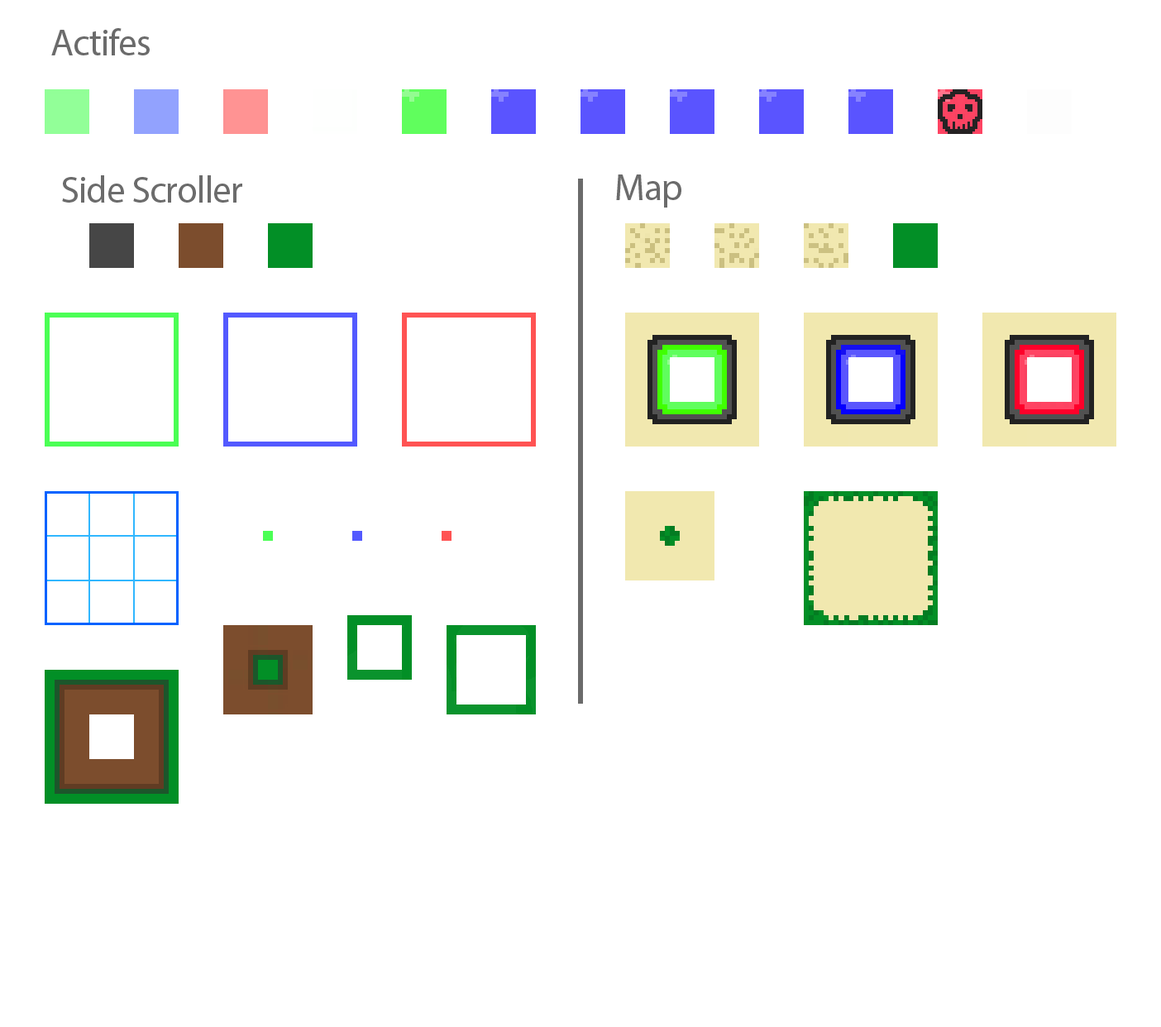
<style>
.page{position:relative;width:1161px;height:1027px;background:#ffffff}
.page>*{position:absolute;margin:0}
.t1{font:37.9px "MyriadPro-Regular";letter-spacing:-0.025em;color:#6b6b6b}
</style>
<div class="page">
<p class="t1" style="left:51px;top:28px;width:99px;height:27px">Actifes</p>
<p class="t1" style="left:62px;top:175px;width:180px;height:28px">Side Scroller</p>
<p class="t1" style="left:616px;top:174px;width:65px;height:34px">Map</p>
</div>
